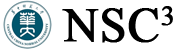
<style>
.page{position:relative;width:188px;height:50px;background:#ffffff}
.page>*{position:absolute;margin:0}
.t1{font:48px "TimesNewRomanPSMT";color:#000000;font-weight:bold}
</style>
<div class="page">
<p class="t1" style="left:62px;top:6px;width:111px;height:37px">NSC3</p>
</div>
